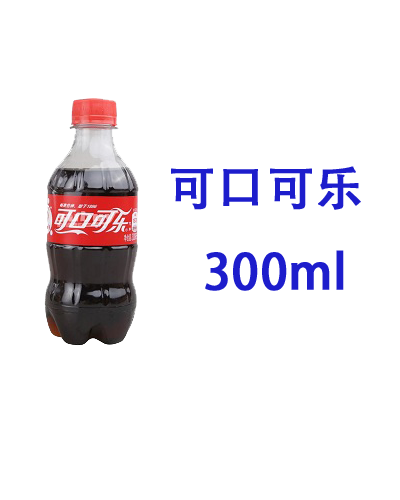
<style>
.page{position:relative;width:400px;height:500px;background:#ffffff}
.page>*{position:absolute;margin:0}
.t1{font:48px "AdobeHeitiStd-Regular";color:#1d1dcc;font-weight:bold}
</style>
<div class="page">
<p class="t1" style="left:171px;top:166px;width:190px;height:125px">可口可乐<br>   300ml</p>
</div>
